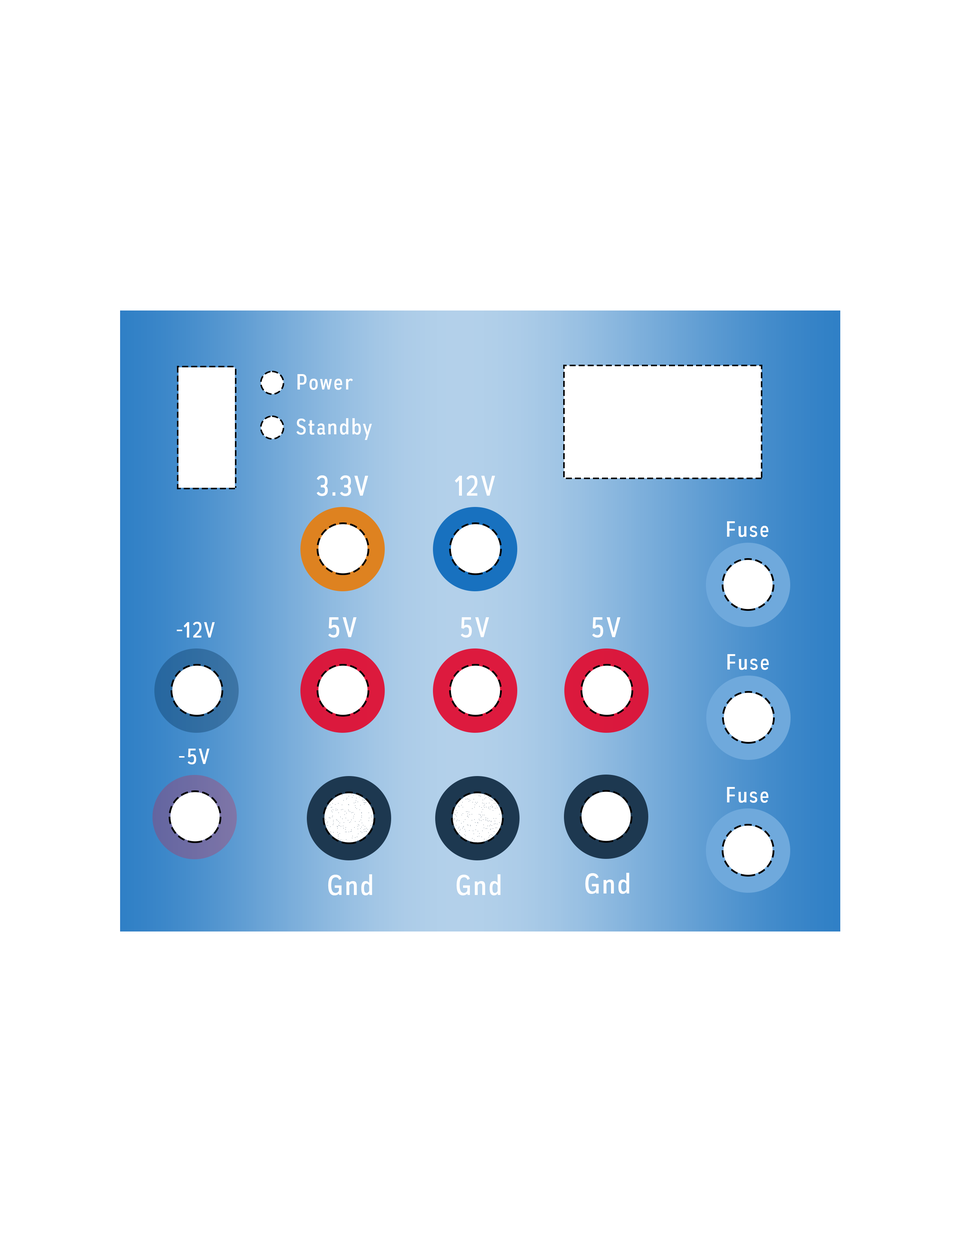
<style>
.page{position:relative;width:960px;height:1242px;background:#ffffff}
.page>*{position:absolute;margin:0}
.t1{font:22px "AutoradiographicRg-Regular";letter-spacing:0.075em;color:#ffffff}
.t2{font:28.2px "AutoradiographicRg-Regular";letter-spacing:0.075em;color:#ffffff}
</style>
<div class="page">
<p class="t1" style="left:297px;top:374px;width:56px;height:16px">Power</p>
<p class="t1" style="left:296px;top:418px;width:76px;height:22px">Standby</p>
<p class="t2" style="left:317px;top:475px;width:51px;height:21px">3.3V</p>
<p class="t2" style="left:455px;top:475px;width:40px;height:21px">12V</p>
<p class="t1" style="left:727px;top:521px;width:41px;height:16px">Fuse</p>
<p class="t2" style="left:328px;top:617px;width:28px;height:21px">5V</p>
<p class="t2" style="left:461px;top:617px;width:28px;height:21px">5V</p>
<p class="t2" style="left:592px;top:617px;width:28px;height:21px">5V</p>
<p class="t1" style="left:177px;top:622px;width:38px;height:16px">-12V</p>
<p class="t1" style="left:727px;top:654px;width:42px;height:16px">Fuse</p>
<p class="t1" style="left:179px;top:749px;width:31px;height:16px">-5V</p>
<p class="t1" style="left:727px;top:787px;width:41px;height:16px">Fuse</p>
<p class="t2" style="left:328px;top:874px;width:44px;height:22px">Gnd</p>
<p class="t2" style="left:456px;top:874px;width:45px;height:22px">Gnd</p>
<p class="t2" style="left:585px;top:873px;width:44px;height:21px">Gnd</p>
</div>
